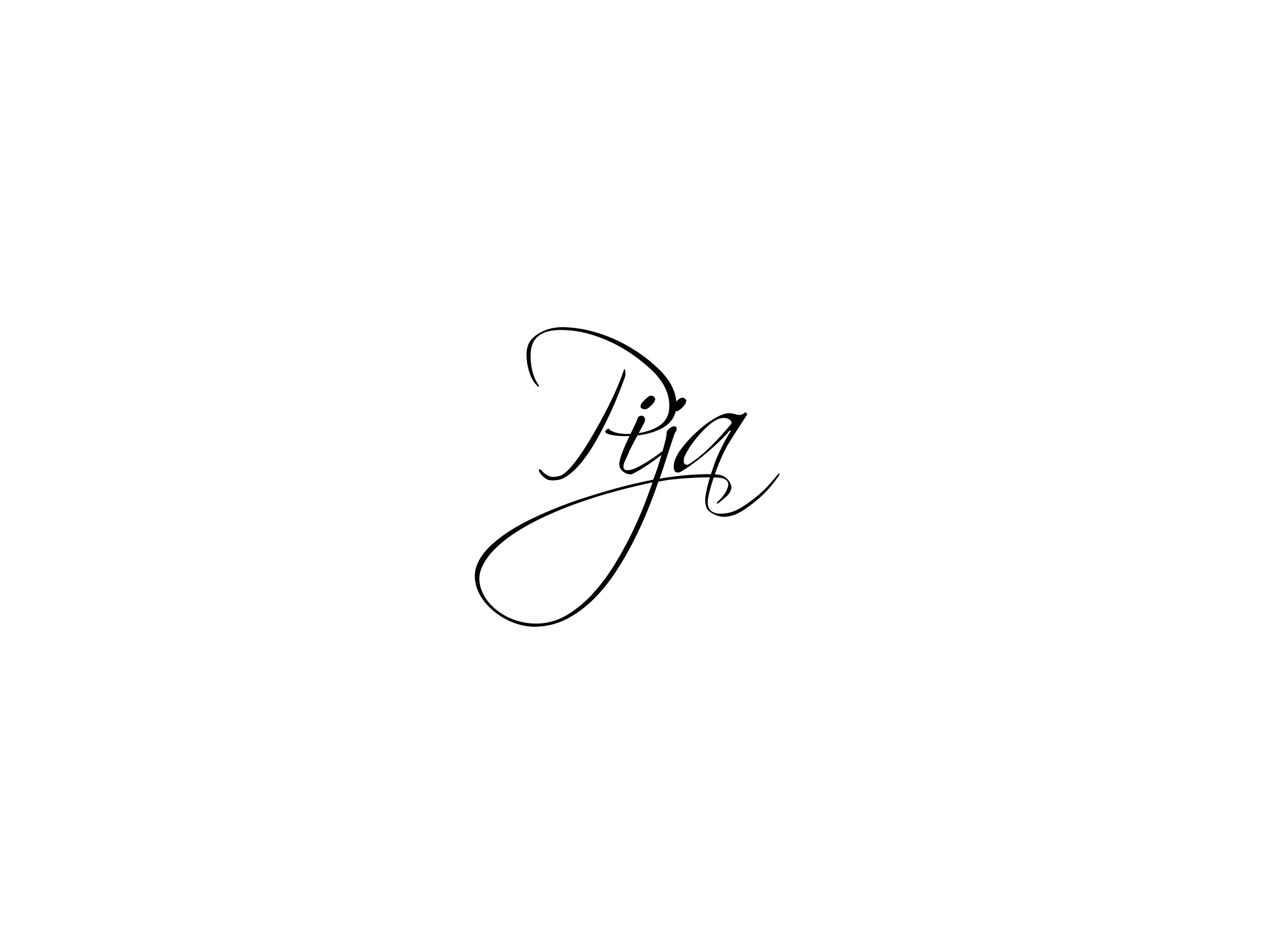
<style>
.page{position:relative;width:1261px;height:946px;background:#ffffff}
.page>*{position:absolute;margin:0}
.t1{font:166.8px "Scriptina";color:#000000}
</style>
<div class="page">
<p class="t1" style="left:474px;top:327px;width:306px;height:300px">Pija</p>
</div>
